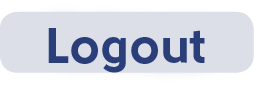
<style>
.page{position:relative;width:254px;height:85px;background:#dcdfe8}
.page>*{position:absolute;margin:0}
.t1{font:50px "Solomon-Sans-Bold";color:#2a3e7a}
</style>
<div class="page">
<p class="t1" style="left:48px;top:28px;width:157px;height:45px">Logout</p>
</div>
